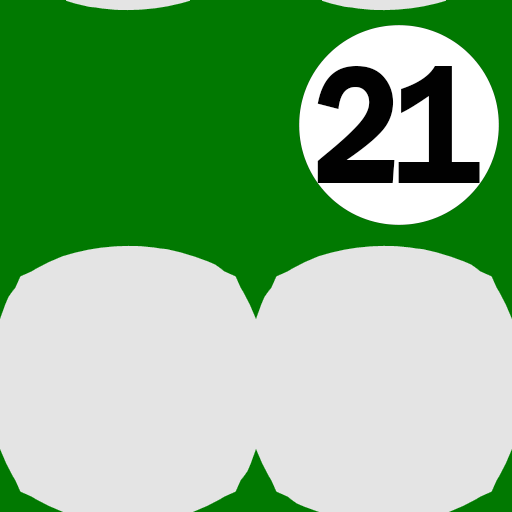
<style>
.page{position:relative;width:512px;height:512px;background:#e4e4e4}
.page>*{position:absolute;margin:0}
.t1{font:172.5px "FranklinGothic-Demi";letter-spacing:-0.05em;color:#010101;scale:0.87 1}
</style>
<div class="page">
<p class="t1" style="left:317px;top:66px;width:163px;height:117px">21</p>
</div>
